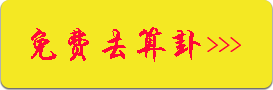
<style>
.page{position:relative;width:273px;height:90px;background:#f4e823}
.page>*{position:absolute;margin:0}
.t1{font:36px "HYi4gj";color:#ff0737}
</style>
<div class="page">
<p class="t1" style="left:31px;top:27px;width:170px;height:35px">免费去算卦</p>
</div>
